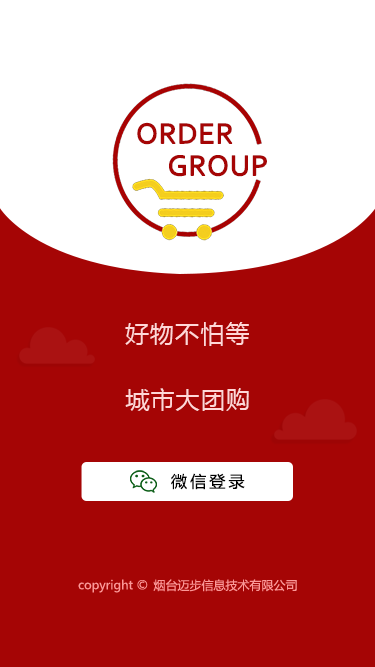
<style>
.page{position:relative;width:375px;height:667px;background:#a50505}
.page>*{position:absolute;margin:0}
.t1{font:30px "Corbel";color:#a50505;text-transform:uppercase;font-weight:bold}
.t2{font:24px "MicrosoftYaHei";letter-spacing:0.05em;color:#ffd7d7}
.t3{font:16px "MicrosoftYaHei";letter-spacing:0.2em;color:#000000}
.t4{font:12px "MicrosoftYaHei";color:#fb9898}
</style>
<div class="page">
<p class="t1" style="left:137px;top:122px;width:96px;height:23px">order</p>
<p class="t1" style="left:169px;top:155px;width:98px;height:22px">group</p>
<p class="t2" style="left:125px;top:322px;width:124px;height:24px">好物不怕等</p>
<p class="t2" style="left:125px;top:388px;width:124px;height:23px">城市大团购</p>
<p class="t3" style="left:171px;top:473px;width:74px;height:17px">微信登录</p>
<p class="t4" style="left:78px;top:579px;width:70px;height:14px">copyright ©</p>
<p class="t4" style="left:153px;top:579px;width:144px;height:13px">烟台迈步信息技术有限公司</p>
</div>
